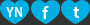
<style>
.page{position:relative;width:90px;height:25px;background:#00b0e2}
.page>*{position:absolute;margin:0}
.t1{font:18px "MyriadPro-Semibold";color:#ffffff}
.t2{font:14px "MyriadPro-Semibold";color:#ffffff}
</style>
<div class="page">
<p class="t1" style="left:42px;top:6px;width:7px;height:13px">f</p>
<p class="t1" style="left:73px;top:6px;width:6px;height:12px">t</p>
<p class="t2" style="left:6px;top:7px;width:16px;height:10px">YN</p>
</div>
